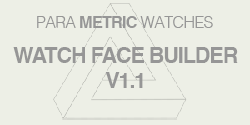
<style>
.page{position:relative;width:250px;height:125px;background:#edefe6}
.page>*{position:absolute;margin:0}
.t1{font:16.3px "Helvetica-Light";letter-spacing:-0.05em;color:#969696}
.t2{font:16.3px "Helvetica-Bold";letter-spacing:-0.05em;color:#969696}
.t3{font:21.6px "Helvetica-Bold";letter-spacing:-0.05em;color:#969696}
</style>
<div class="page">
<p class="t1" style="left:37px;top:16px;width:176px;height:12px">PARA <span class="t2">METRIC </span>WATCHES</p>
<p class="t3" style="left:13px;top:47px;width:225px;height:41px;text-align:center">WATCH FACE BUILDER<br>V1.1</p>
</div>
